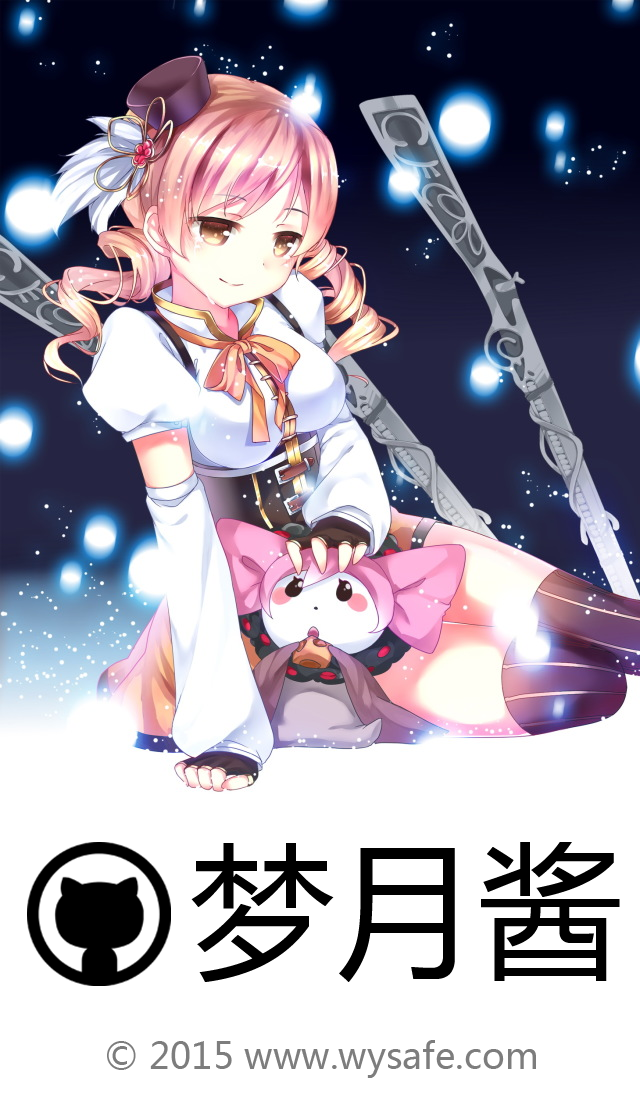
<style>
.page{position:relative;width:640px;height:1096px;background:#ffffff}
.page>*{position:absolute;margin:0}
.t1{font:144px "MicrosoftYaHei";color:#000000}
.t2{font:36px "MicrosoftYaHei";color:#7d7d7d}
</style>
<div class="page">
<p class="t1" style="left:191px;top:842px;width:429px;height:140px">梦月酱</p>
<p class="t2" style="left:107px;top:1040px;width:429px;height:38px">© 2015 www.wysafe.com</p>
</div>
